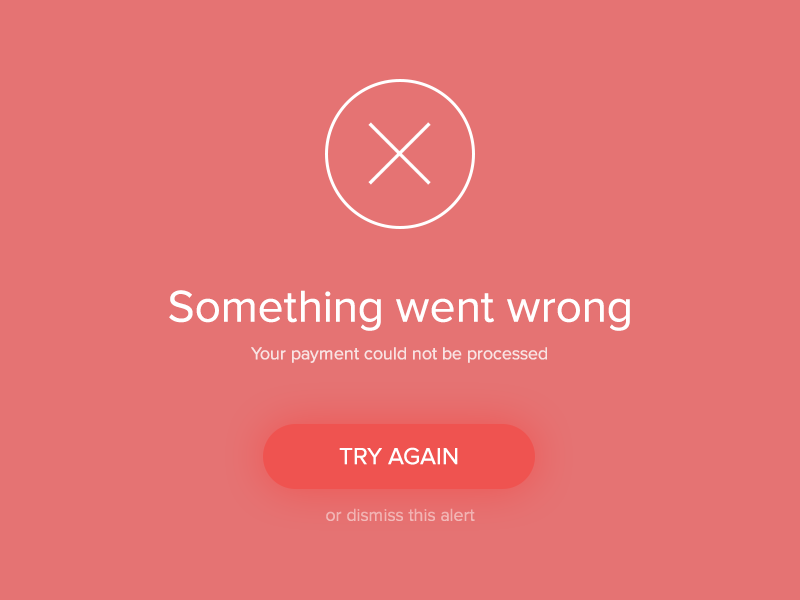
<style>
.page{position:relative;width:800px;height:600px;background:#e57373}
.page>*{position:absolute;margin:0}
.t1{font:46px "ProximaNova-Regular";color:#ffffff}
.t2{font:18px "ProximaNova-Regular";color:#f9e3e3}
.t3{font:24px "ProximaNova-Regular";color:#ffffff}
.t4{font:18px "ProximaNova-Regular";color:#f2b6b5}
</style>
<div class="page">
<p class="t1" style="left:169px;top:290px;width:461px;height:41px">Something went wrong</p>
<p class="t2" style="left:251px;top:347px;width:296px;height:16px">Your payment could not be processed</p>
<p class="t3" style="left:339px;top:447px;width:119px;height:18px">TRY AGAIN</p>
<p class="t4" style="left:326px;top:508px;width:149px;height:13px">or dismiss this alert</p>
</div>
